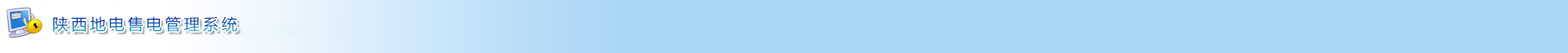
<style>
.page{position:relative;width:1568px;height:53px;background:#a9d6f6}
.page>*{position:absolute;margin:0}
.t1{font:15.7px "MicrosoftYaHei";letter-spacing:0.2em}
</style>
<div class="page">
<p class="t1" style="left:53px;top:16px;width:185px;height:16px">陕西地电售电管理系统</p>
</div>
